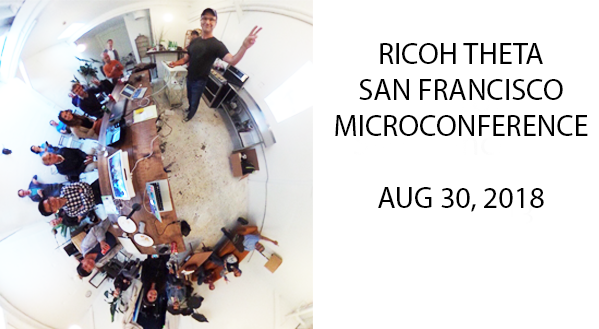
<style>
.page{position:relative;width:599px;height:329px;background:#ffffff}
.page>*{position:absolute;margin:0}
.t1{font:30px "MyriadPro-Regular";color:#000000}
</style>
<div class="page">
<p class="t1" style="left:335px;top:43px;width:253px;height:169px;text-align:center">RICOH THETA<br>SAN FRANCISCO<br>MICROCONFERENCE<br><br>AUG 30, 2018</p>
</div>
